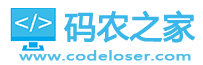
<style>
.page{position:relative;width:203px;height:65px;background:#ffffff}
.page>*{position:absolute;margin:0}
.t1{font:32px "MicrosoftYaHei";color:#3ab6e9;font-weight:bold}
.t2{font:12px "MicrosoftYaHei";color:#51bde9;font-weight:bold;scale:1.43 1}
</style>
<div class="page">
<p class="t1" style="left:64px;top:10px;width:131px;height:33px">码农之家</p>
<p class="t2" style="left:19px;top:50px;width:172px;height:11px">www.codeloser.com</p>
</div>
